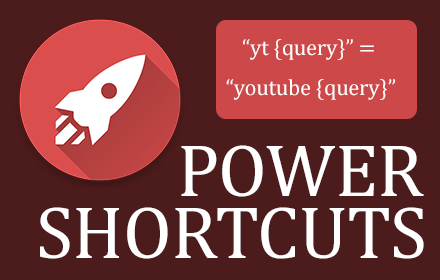
<style>
.page{position:relative;width:440px;height:280px;background:#4c1b1b}
.page>*{position:absolute;margin:0}
.t1{font:22.5px/15px "CambriaMath";letter-spacing:-0.01em;color:#ffffff}
.t2{font:75px "CambriaMath";letter-spacing:-0.01em;color:#ffffff}
</style>
<div class="page">
<p class="t1" style="left:226px;top:39px;width:169px;height:61px;text-align:center">“yt {query}” = <br>“youtube {query}”</p>
<p class="t2" style="left:181px;top:145px;width:243px;height:52px">POWER</p>
<p class="t2" style="left:40px;top:207px;width:384px;height:52px">SHORTCUTS</p>
</div>
